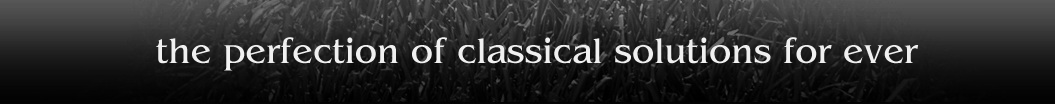
<style>
.page{position:relative;width:1055px;height:104px}
.page>*{position:absolute;margin:0}
.t1{font:36px "Benguiat";color:#f0f0f0}
</style>
<div class="page">
<p class="t1" style="left:156px;top:37px;width:763px;height:34px">the perfection of classical solutions for ever</p>
</div>
